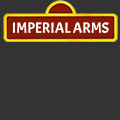
<style>
.page{position:relative;width:120px;height:120px;background:#333333}
.page>*{position:absolute;margin:0}
.t1{font:14.7px "Acme-Regular";color:#ffffff}
</style>
<div class="page">
<p class="t1" style="left:13px;top:22px;width:96px;height:11px">IMPERIAL ARMS</p>
</div>
